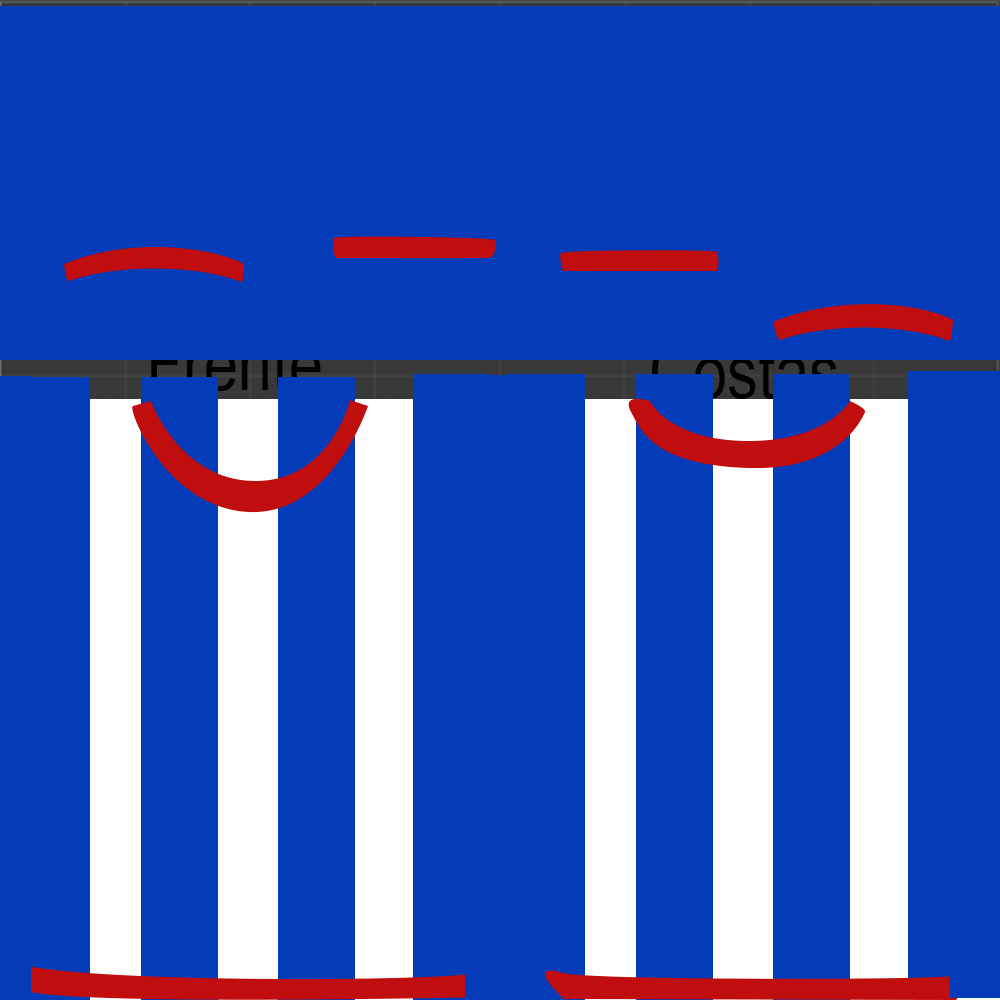
<style>
.page{position:relative;width:1000px;height:1000px;background:#043bb8}
.page>*{position:absolute;margin:0}
.t1{font:75px "ArialNarrow"}
</style>
<div class="page">
<p class="t1" style="left:151px;top:336px;width:170px;height:55px">Frente</p>
<p class="t1" style="left:651px;top:343px;width:187px;height:56px">Costas</p>
</div>
